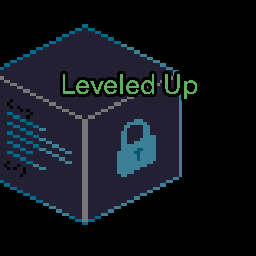
<style>
.page{position:relative;width:256px;height:256px;background:#000000}
.page>*{position:absolute;margin:0}
.t1{font:28px "CircularStd-Book";color:#5db05c}
</style>
<div class="page">
<p class="t1" style="left:63px;top:74px;width:134px;height:25px">Leveled Up</p>
</div>
